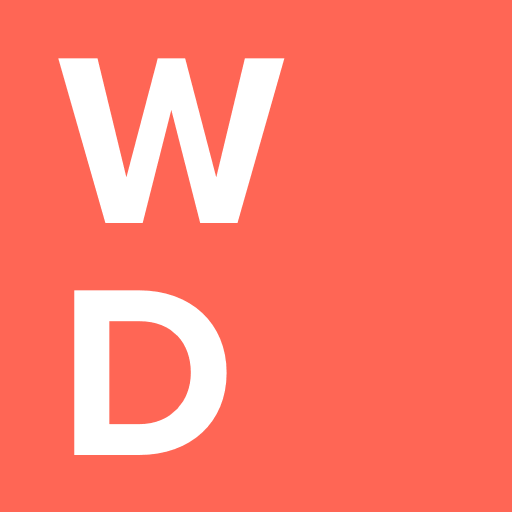
<style>
.page{position:relative;width:512px;height:512px;background:#ff6655}
.page>*{position:absolute;margin:0}
.t1{font:246.9px/231.5px "ProximaNova-Bold";color:#ffffff}
</style>
<div class="page">
<p class="t1" style="left:58px;top:58px;width:227px;height:397px">W<br>D</p>
</div>
